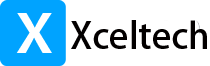
<style>
.page{position:relative;width:210px;height:66px;background:#ffffff}
.page>*{position:absolute;margin:0}
.t1{font:36px "AdobeHeitiStd-Regular";color:#030000}
</style>
<div class="page">
<p class="t1" style="left:71px;top:20px;width:136px;height:29px">Xceltech</p>
</div>
